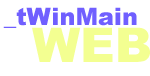
<style>
.page{position:relative;width:150px;height:76px;background:#ffffff}
.page>*{position:absolute;margin:0}
.t1{font:24px "Arial-Black";color:#705fff}
.t2{font:48px "Arial-Black";color:#f3ff91}
</style>
<div class="page">
<p class="t1" style="left:3px;top:7px;width:134px;height:21px">_tWinMain</p>
<p class="t2" style="left:32px;top:27px;width:118px;height:35px">WEB</p>
</div>
